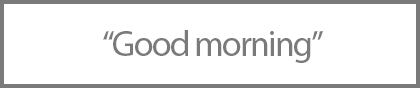
<style>
.page{position:relative;width:420px;height:88px;background:#ffffff}
.page>*{position:absolute;margin:0}
.t1{font:36px "MyriadPro-Regular";letter-spacing:-0.05em;color:#7a7a7a}
</style>
<div class="page">
<p class="t1" style="left:103px;top:30px;width:220px;height:33px">“Good morning”</p>
</div>
